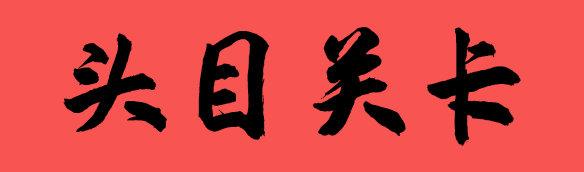
<style>
.page{position:relative;width:584px;height:172px;background:#f85452}
.page>*{position:absolute;margin:0}
.t1{font:133.3px "zihun110hao-wulinjianghuti-Regular";letter-spacing:-0.1em;color:#000000}
</style>
<div class="page">
<p class="t1" style="left:63px;top:27px;width:458px;height:119px">头目关卡</p>
</div>
